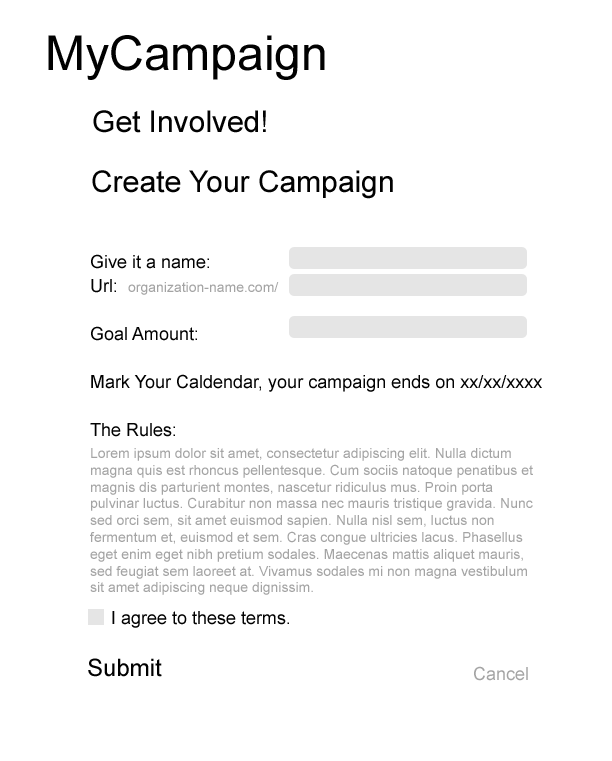
<style>
.page{position:relative;width:612px;height:761px;background:#ffffff}
.page>*{position:absolute;margin:0}
.t1{font:48px "ArialMT";color:#010101}
.t2{font:30px "ArialMT";color:#010101}
.t3{font:18px/24px "ArialMT";color:#010101}
.t4{font:14px/24px "ArialMT";color:#a4a4a4}
.t5{font:14px "ArialMT";color:#a4a4a4}
.t6{font:18px "ArialMT";color:#010101}
.t7{font:24px "ArialMT";color:#010101}
.t8{font:18px "ArialMT";color:#a4a4a4}
</style>
<div class="page">
<p class="t1" style="left:48px;top:35px;width:277px;height:45px">MyCampaign</p>
<p class="t2" style="left:93px;top:110px;width:173px;height:23px">Get Involved!</p>
<p class="t2" style="left:92px;top:170px;width:301px;height:29px">Create Your Campaign</p>
<p class="t3" style="left:90px;top:254px;width:452px;height:183px">Give it a name:<br>Url:  <span class="t4">organization-name.com/<br><br></span>Goal Amount:<br><br>Mark Your Caldendar, your campaign ends on xx/xx/xxxx<br><br>The Rules:</p>
<p class="t5" style="left:90px;top:448px;width:443px;height:147px">Lorem ipsum dolor sit amet, consectetur adipiscing elit. Nulla dictum magna quis est rhoncus pellentesque. Cum sociis natoque penatibus et magnis dis parturient montes, nascetur ridiculus mus. Proin porta pulvinar luctus. Curabitur non massa nec mauris tristique gravida. Nunc sed orci sem, sit amet euismod sapien. Nulla nisl sem, luctus non fermentum et, euismod et sem. Cras congue ultricies lacus. Phasellus eget enim eget nibh pretium sodales. Maecenas mattis aliquet mauris, sed feugiat sem laoreet at. Vivamus sodales mi non magna vestibulum sit amet adipiscing neque dignissim.</p>
<p class="t6" style="left:112px;top:611px;width:177px;height:17px">I agree to these terms.</p>
<p class="t7" style="left:88px;top:658px;width:74px;height:19px">Submit</p>
<p class="t8" style="left:474px;top:666px;width:54px;height:15px">Cancel</p>
</div>
